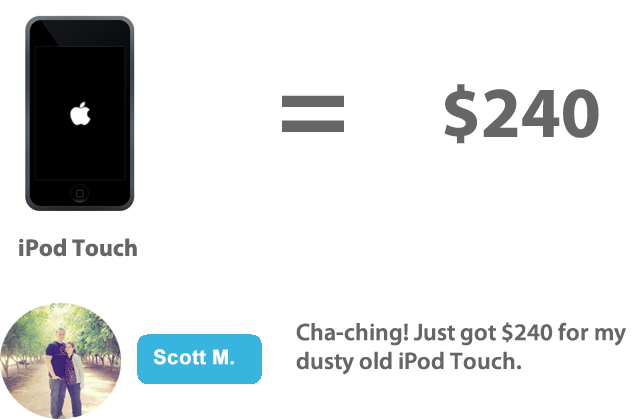
<style>
.page{position:relative;width:635px;height:419px;background:#ffffff}
.page>*{position:absolute;margin:0}
.t1{font:72px "MyriadPro-Bold";color:#666666}
.t2{font:120px "MyriadPro-Bold";color:#666666}
.t3{font:24px "MyriadPro-Bold";color:#666666}
.t4{font:24px "MyriadPro-Semibold";color:#666666}
.t5{font:20px "Arial-BoldMT";color:#ffffff;font-weight:bold}
</style>
<div class="page">
<p class="t1" style="left:444px;top:84px;width:155px;height:60px">$240</p>
<p class="t2" style="left:282px;top:95px;width:62px;height:37px">=</p>
<p class="t3" style="left:19px;top:238px;width:118px;height:19px">iPod Touch</p>
<p class="t4" style="left:296px;top:322px;width:330px;height:53px">Cha-ching! Just got $240 for my dusty old iPod Touch.</p>
<p class="t5" style="left:153px;top:349px;width:81px;height:16px">Scott M.</p>
</div>
